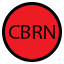
<style>
.page{position:relative;width:64px;height:64px;background:#ed1c24}
.page>*{position:absolute;margin:0}
.t1{font:20.8px "MyriadPro-Regular";color:#010101}
</style>
<div class="page">
<p class="t1" style="left:8px;top:25px;width:47px;height:14px">CBRN</p>
</div>
